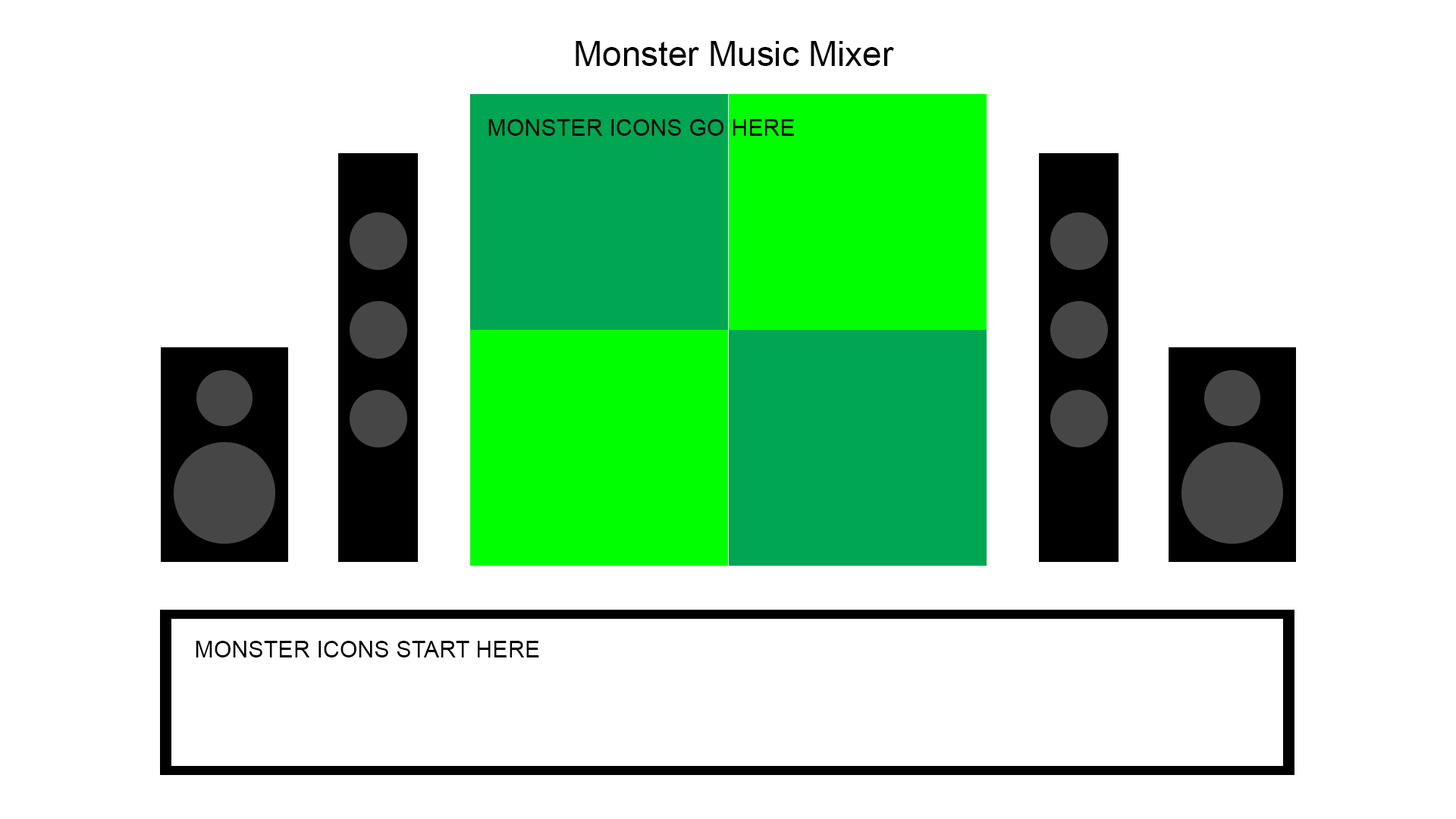
<style>
.page{position:relative;width:1456px;height:819px;background:#ffffff}
.page>*{position:absolute;margin:0}
.t1{font:34.7px "ArialMT";color:#000000}
.t2{font:23.1px "ArialMT";color:#000000}
</style>
<div class="page">
<p class="t1" style="left:576px;top:41px;width:318px;height:25px">Monster Music Mixer</p>
<p class="t2" style="left:488px;top:119px;width:306px;height:17px">MONSTER ICONS GO HERE</p>
<p class="t2" style="left:196px;top:641px;width:343px;height:16px">MONSTER ICONS START HERE</p>
</div>
